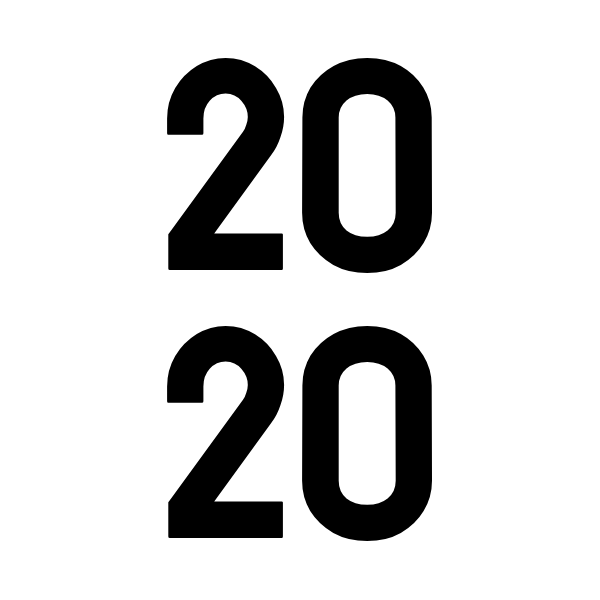
<style>
.page{position:relative;width:600px;height:600px;background:#ffffff}
.page>*{position:absolute;margin:0}
.t1{font:300px "Staatliches-Regular";color:#000000}
</style>
<div class="page">
<p class="t1" style="left:167px;top:57px;width:266px;height:216px">20</p>
<p class="t1" style="left:167px;top:325px;width:266px;height:216px">20</p>
</div>
